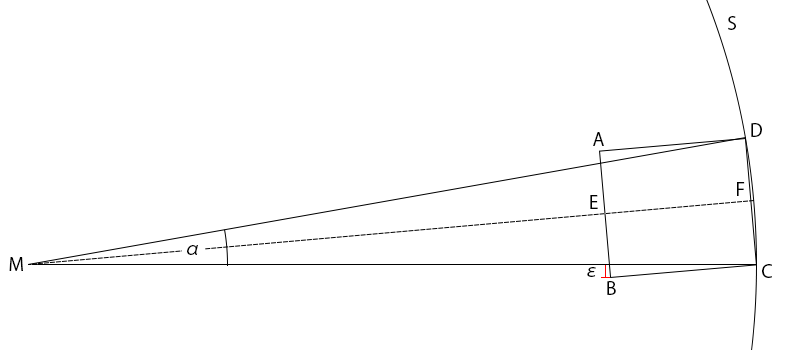
<style>
.page{position:relative;width:800px;height:350px;background:#ffffff}
.page>*{position:absolute;margin:0}
.t1{font:18px "KozGoPr6N-Regular";color:#000000}
</style>
<div class="page">
<p class="t1" style="left:728px;top:16px;width:8px;height:14px">S</p>
<p class="t1" style="left:751px;top:123px;width:11px;height:14px">D</p>
<p class="t1" style="left:593px;top:132px;width:11px;height:14px">A</p>
<p class="t1" style="left:737px;top:182px;width:8px;height:14px">F</p>
<p class="t1" style="left:590px;top:195px;width:8px;height:14px">E</p>
<p class="t1" style="left:187px;top:245px;width:11px;height:10px">α</p>
<p class="t1" style="left:9px;top:257px;width:14px;height:14px">M</p>
<p class="t1" style="left:587px;top:267px;width:9px;height:10px">ε</p>
<p class="t1" style="left:762px;top:264px;width:10px;height:14px">C</p>
<p class="t1" style="left:607px;top:281px;width:9px;height:14px">B</p>
</div>
